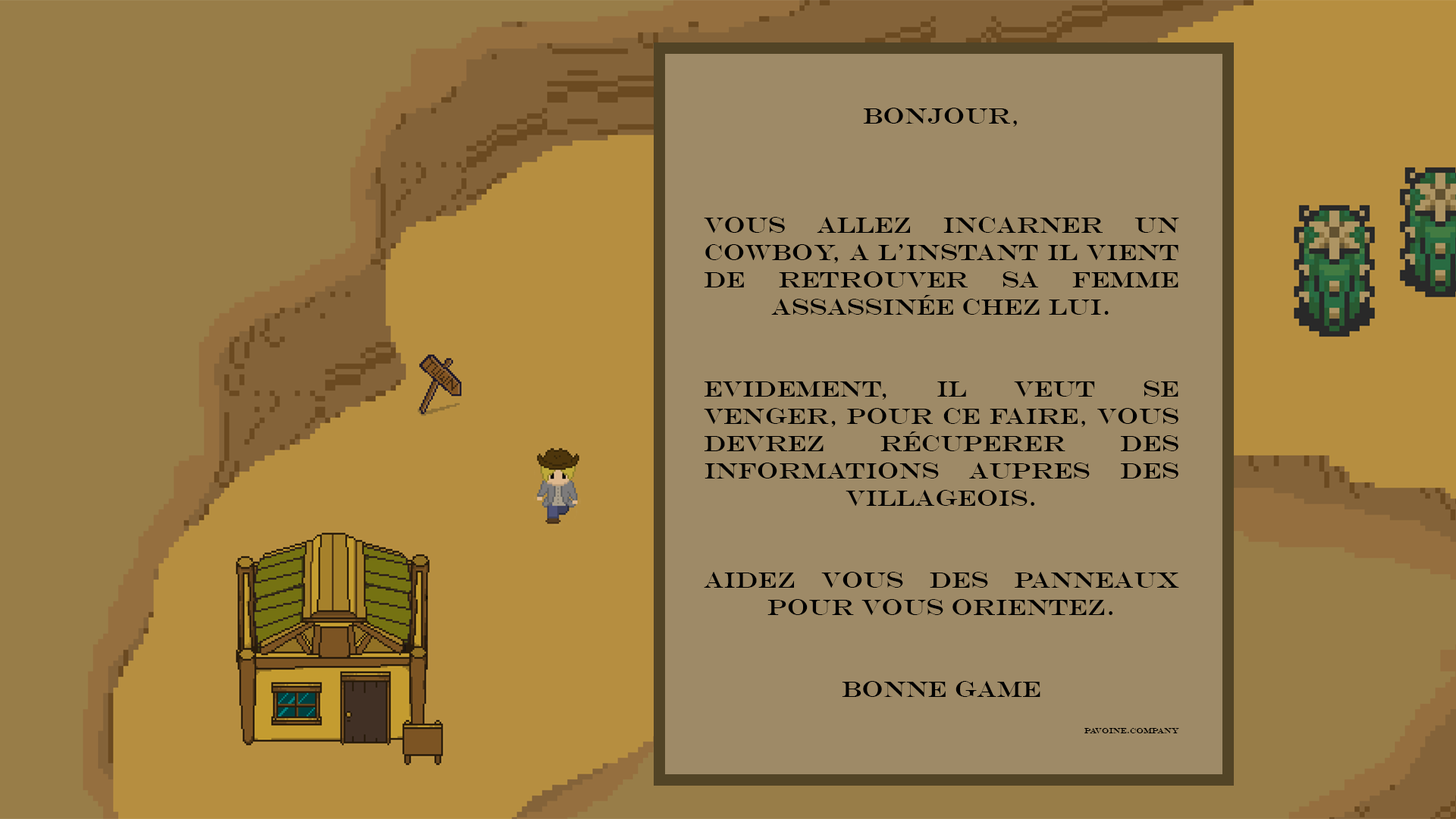
<style>
.page{position:relative;width:1456px;height:819px;background:#9e8a67}
.page>*{position:absolute;margin:0}
.t1{font:22.7px "EngraversMT";color:#000000}
.t2{font:7.6px "EngraversMT";color:#000000}
</style>
<div class="page">
<p class="t1" style="left:704px;top:108px;width:475px;height:625px;text-align:justify">bonjour, <br><br><br><br>vous allez incarner un cowboy, a l’instant il vient de retrouver sa femme assassinée chez lui.<br><br><br>Evidement, il veut se venger, pour ce faire, vous devrez récuperer des informations aupres des villageois. <br><br><br>aidez vous des panneaux pour vous orientez.<br><br><br>bonne game<br><br><span class="t2">pavoine.company</span></p>
</div>
